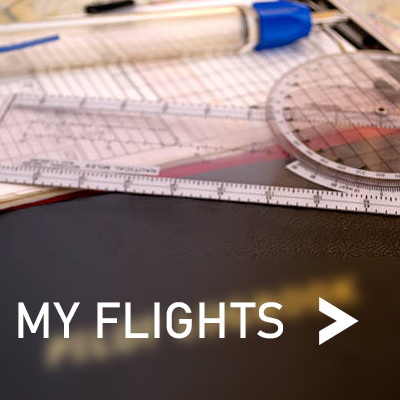
<style>
.page{position:relative;width:400px;height:400px}
.page>*{position:absolute;margin:0}
.t1{font:50px "Bahnschrift";color:#ffffff}
.t2{font:120px "Bahnschrift";color:#ffffff}
</style>
<div class="page">
<p class="t1" style="left:18px;top:302px;width:265px;height:37px">MY FLIGHTS</p>
<p class="t2" style="left:319px;top:297px;width:40px;height:48px">&gt;</p>
</div>
